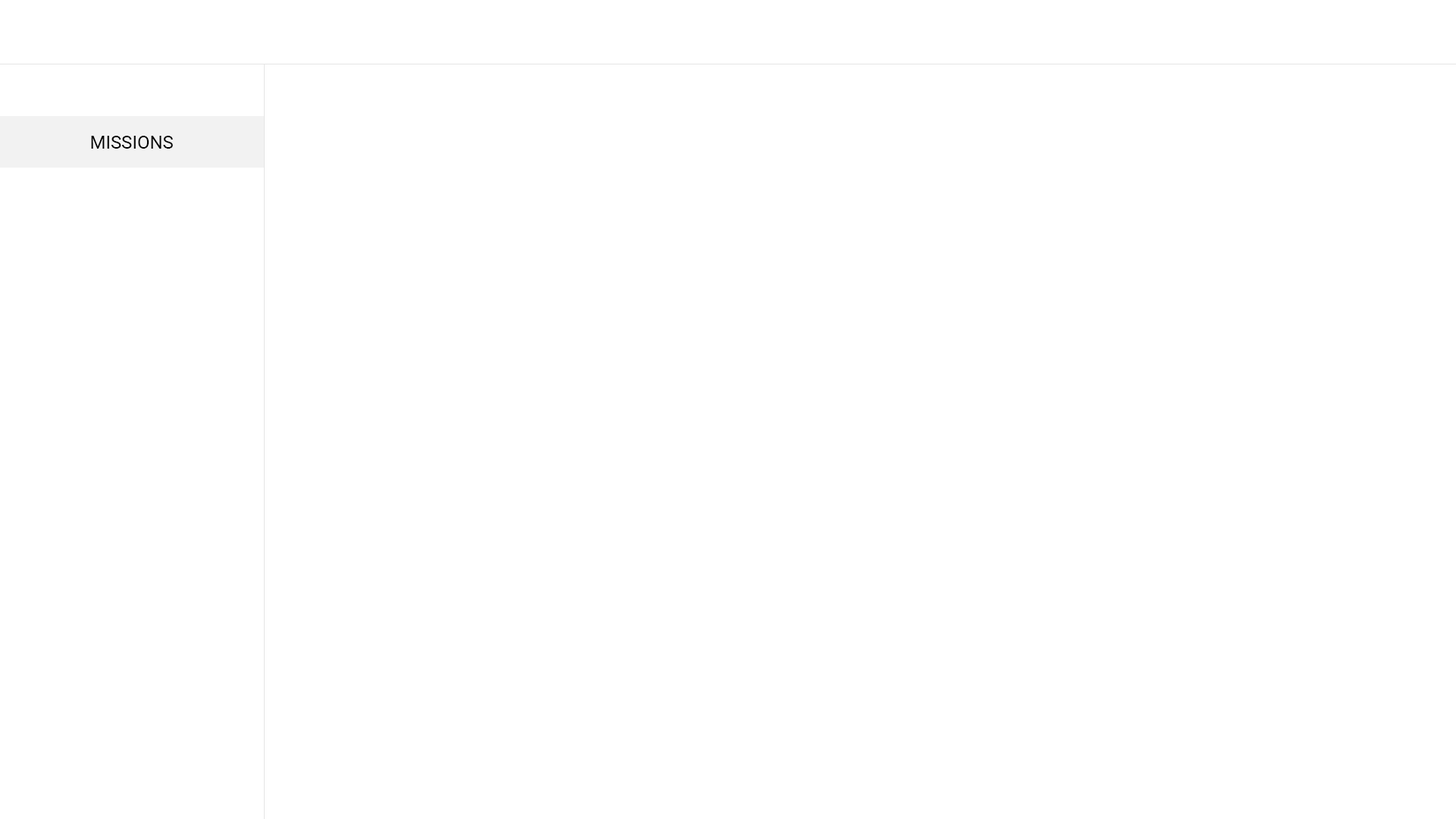
<style>
.page{position:relative;width:1456px;height:819px;background:#ffffff}
.page>*{position:absolute;margin:0}
.t1{font:18.2px "Roboto-Regular";color:#000000}
</style>
<div class="page">
<p class="t1" style="left:91px;top:136px;width:82px;height:13px">MISSIONS</p>
</div>
